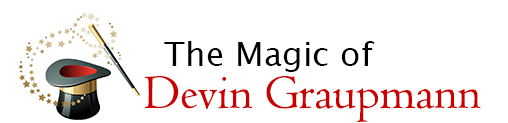
<style>
.page{position:relative;width:508px;height:123px;background:#ffffff}
.page>*{position:absolute;margin:0}
.t1{font:33.3px "LucidaSans";color:#000000}
.t2{font:50px "Centaur";color:#cc0000}
</style>
<div class="page">
<p class="t1" style="left:164px;top:41px;width:211px;height:31px">The Magic of</p>
<p class="t2" style="left:145px;top:76px;width:336px;height:46px">Devin Graupmann</p>
</div>
